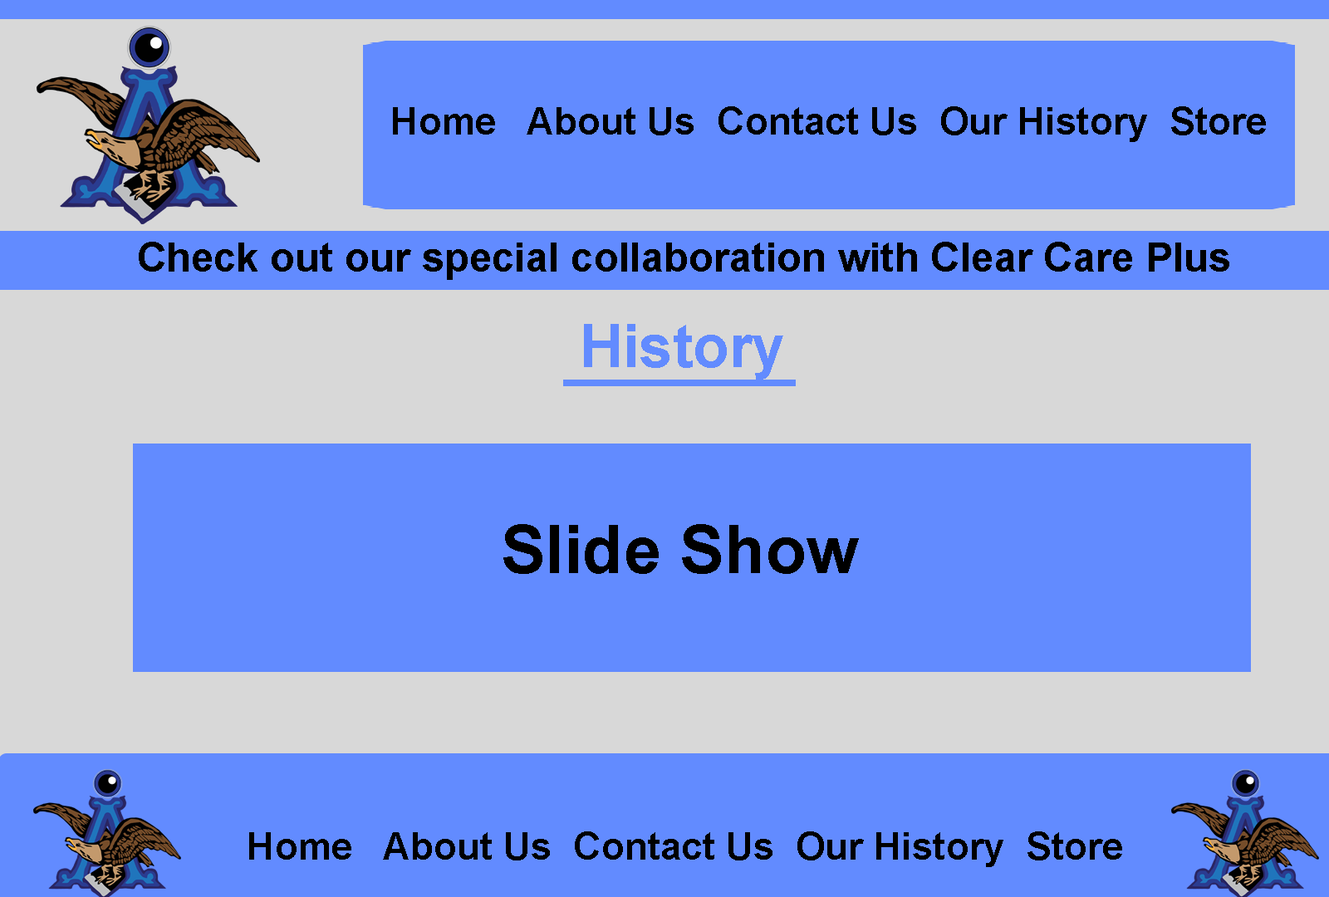
<style>
.page{position:relative;width:1329px;height:897px;background:#628bff}
.page>*{position:absolute;margin:0}
.t1{font:38.1px "Arial-BoldMT";color:#000000}
.t2{font:40.7px "Arial-BoldMT";color:#000000}
.t3{font:59.8px "Arial-BoldMT";color:#628bff}
.t4{font:67.2px "Arial-BoldMT";color:#000000}
</style>
<div class="page">
<p class="t1" style="left:393px;top:106px;width:873px;height:36px">Home   About Us  Contact Us  Our History  Store</p>
<p class="t2" style="left:139px;top:242px;width:1090px;height:38px">Check out our special collaboration with Clear Care Plus</p>
<p class="t3" style="left:584px;top:324px;width:199px;height:56px">History</p>
<p class="t4" style="left:503px;top:524px;width:356px;height:50px">Slide Show</p>
<p class="t1" style="left:249px;top:832px;width:873px;height:35px">Home   About Us  Contact Us  Our History  Store</p>
</div>
